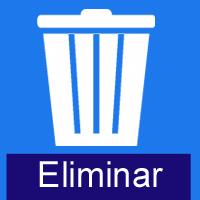
<style>
.page{position:relative;width:200px;height:200px;background:#1d79eb}
.page>*{position:absolute;margin:0}
.t1{font:36px "ArialMT";color:#ffffff;scale:0.96 1}
</style>
<div class="page">
<p class="t1" style="left:39px;top:161px;width:124px;height:27px">Eliminar</p>
</div>
